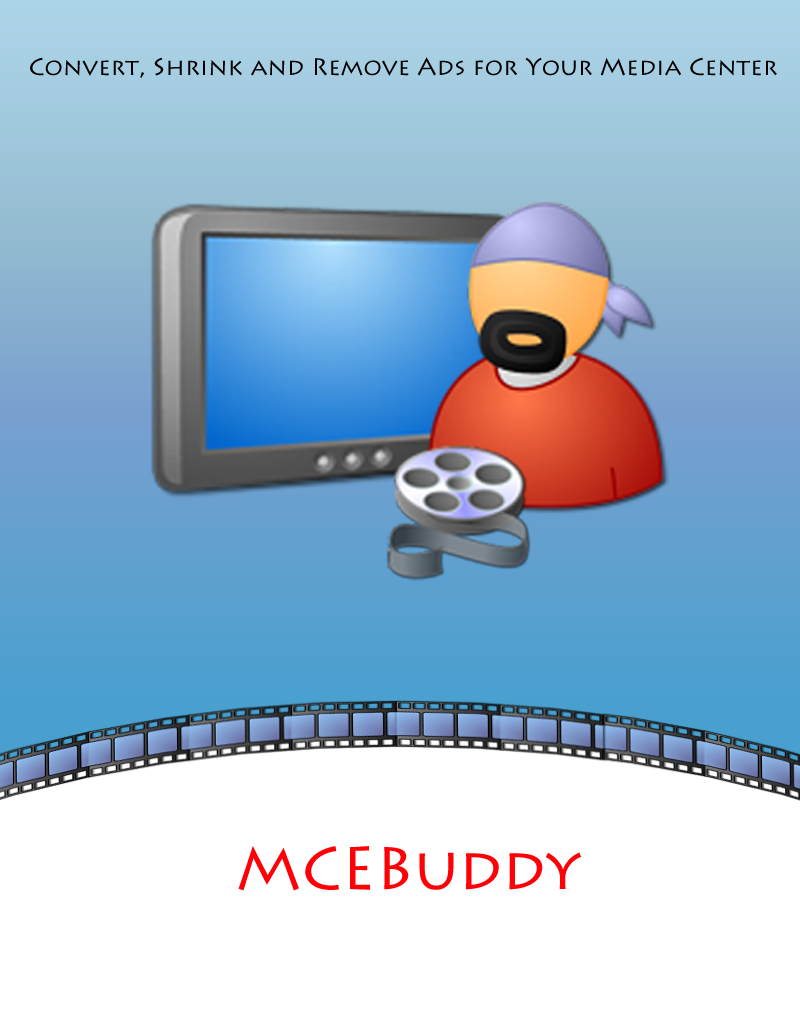
<style>
.page{position:relative;width:800px;height:1010px;background:#ffffff}
.page>*{position:absolute;margin:0}
.t1{font:24px "LithosPro-Regular";color:#000000}
.t2{font:60px "LithosPro-Regular";color:#ff0006}
</style>
<div class="page">
<p class="t1" style="left:30px;top:57px;width:747px;height:21px">Convert, Shrink and Remove Ads for Your Media Center</p>
<p class="t2" style="left:238px;top:846px;width:343px;height:45px">MCEBuddy</p>
</div>
